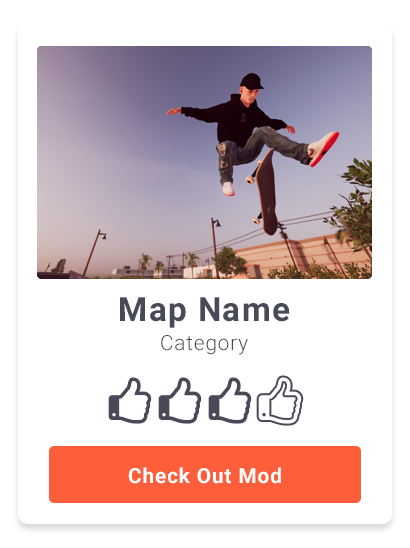
<style>
.page{position:relative;width:410px;height:548px;background:#ffffff}
.page>*{position:absolute;margin:0}
.t1{font:33.3px "Roboto-Bold";letter-spacing:0.04em;color:#484a57}
.t2{font:20.8px "Roboto-Light";letter-spacing:0.04em;color:#484a57}
.t3{font:20.8px "Roboto-Bold";letter-spacing:0.04em;color:#ffffff}
</style>
<div class="page">
<p class="t1" style="left:120px;top:297px;width:170px;height:31px">Map Name</p>
<p class="t2" style="left:161px;top:335px;width:87px;height:20px">Category</p>
<p class="t3" style="left:128px;top:467px;width:153px;height:17px">Check Out Mod</p>
</div>
